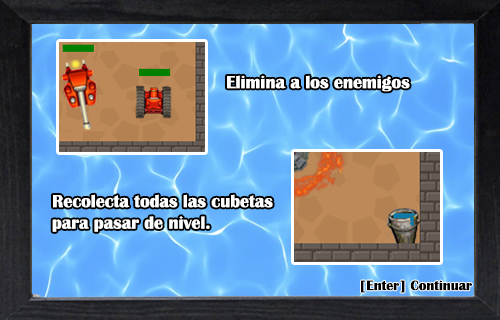
<style>
.page{position:relative;width:500px;height:320px}
.page>*{position:absolute;margin:0}
.t1{font:17.9px "BritannicBold";color:#ffffff}
.t2{font:14px "BritannicBold";color:#000000}
</style>
<div class="page">
<p class="t1" style="left:227px;top:75px;width:183px;height:17px">Elimina a los enemigos</p>
<p class="t1" style="left:52px;top:194px;width:221px;height:38px">Recolecta todas las cubetas para pasar de nivel.</p>
<p class="t2" style="left:361px;top:280px;width:111px;height:13px">[Enter] Continuar</p>
</div>
